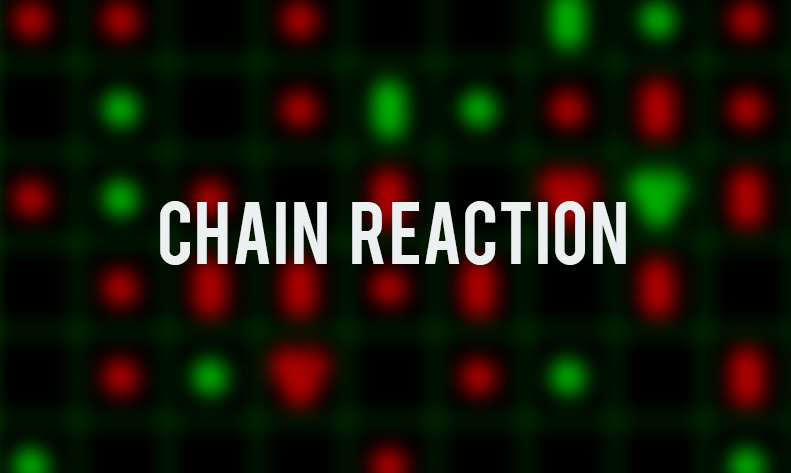
<style>
.page{position:relative;width:791px;height:473px}
.page>*{position:absolute;margin:0}
.t1{font:69.7px "Bebas";color:#ecf0f1}
</style>
<div class="page">
<p class="t1" style="left:160px;top:201px;width:466px;height:64px">Chain   Reaction</p>
</div>
